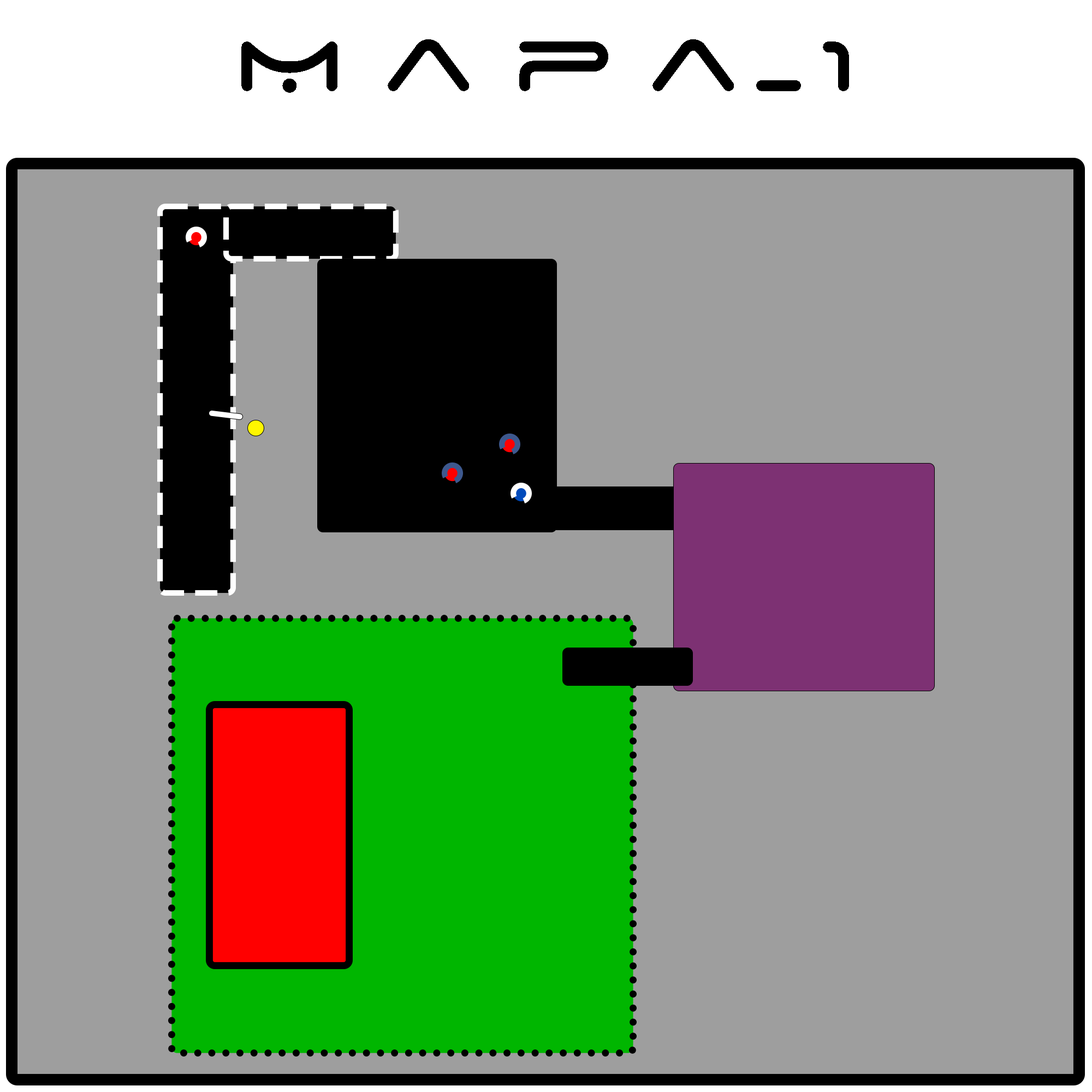
<style>
.page{position:relative;width:1092px;height:1092px;background:#9e9e9e}
.page>*{position:absolute;margin:0}
.t1{font:113.7px "SpaceAge";letter-spacing:0.34em;color:#000000}
</style>
<div class="page">
<p class="t1" style="left:241px;top:39px;width:608px;height:54px">Mapa_1</p>
</div>
